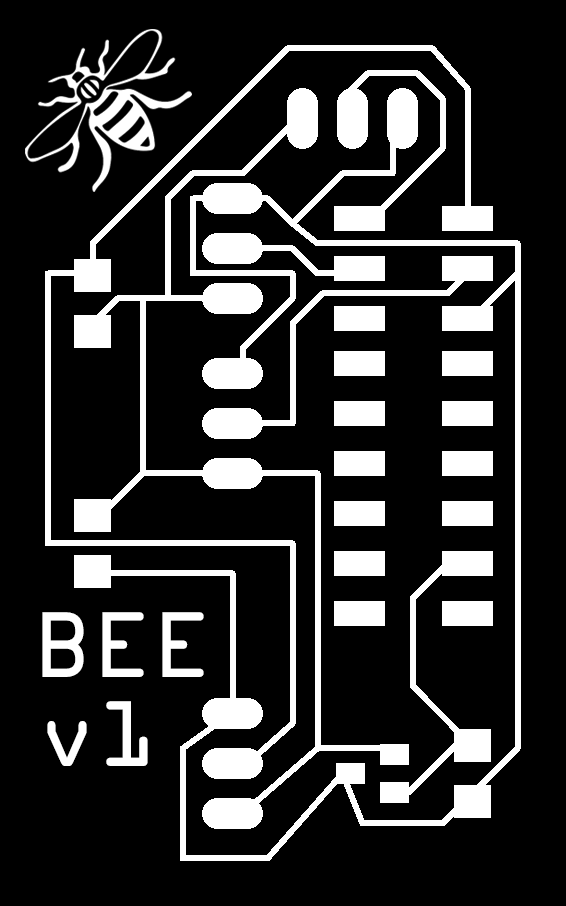
<style>
.page{position:relative;width:566px;height:906px;background:#000000}
.page>*{position:absolute;margin:0}
.t1{font:83.3px "OCRAStd";color:#ffffff}
</style>
<div class="page">
<p class="t1" style="left:42px;top:612px;width:162px;height:65px">BEE</p>
<p class="t1" style="left:47px;top:701px;width:101px;height:65px">v1</p>
</div>
